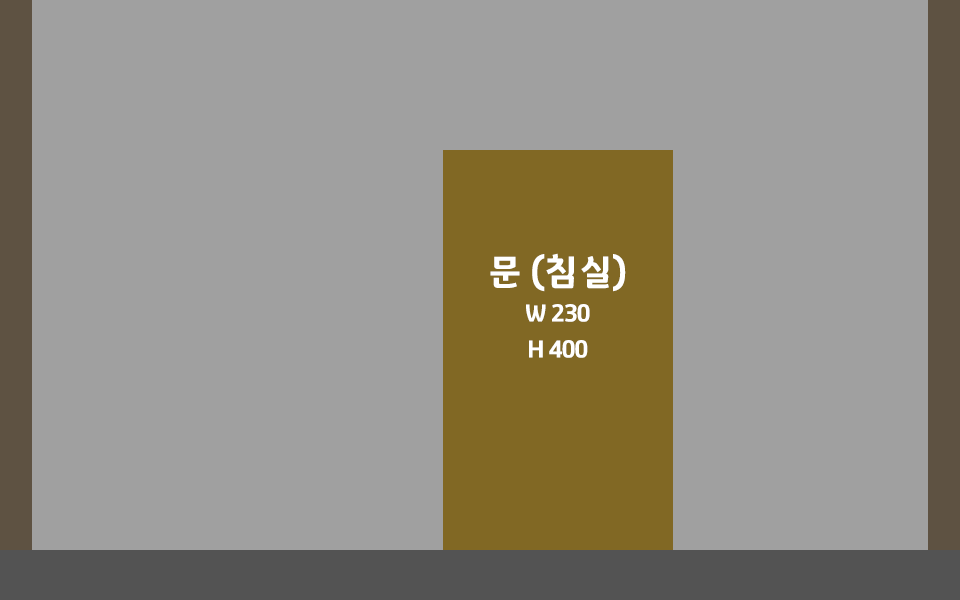
<style>
.page{position:relative;width:960px;height:600px;background:#a0a0a0}
.page>*{position:absolute;margin:0}
.t1{font:24px/36px "GyeonggiTitleV";letter-spacing:-0.05em;color:#ffffff}
.t2{font:36px/12px "GyeonggiTitleV";letter-spacing:-0.05em;color:#ffffff}
</style>
<div class="page">
<p class="t1" style="left:490px;top:253px;width:136px;height:105px;text-align:center"><span class="t2">문 (침실)<br><br><br><br></span>W 230<br>H 400</p>
</div>
